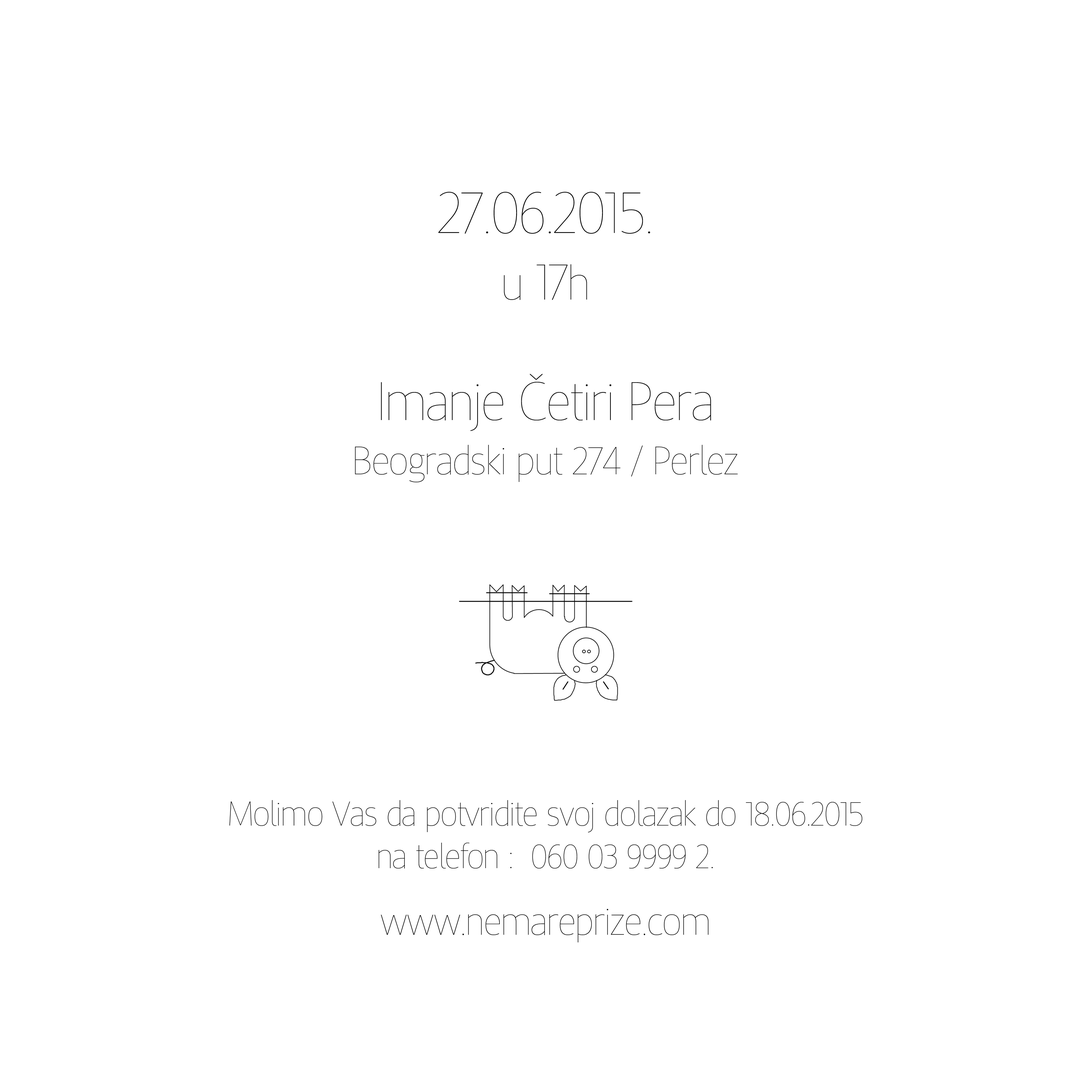
<style>
.page{position:relative;width:1092px;height:1092px;background:#ffffff}
.page>*{position:absolute;margin:0}
.t1{font:33.3px/42.4px "AdamantSansBG";color:#000000}
.t2{font:57.8px/66.7px "AdamantSansBG";color:#000000}
.t3{font:46.2px/66.7px "AdamantSansBG";color:#000000}
.t4{font:50.1px/66.7px "AdamantSansBG";color:#000000}
.t5{font:52.4px/53.9px "AdamantSansBG";color:#000000}
.t6{font:38.5px/53.9px "AdamantSansBG";color:#000000}
.t7{font:38.1px/66.7px "AdamantSansBG";color:#000000}
</style>
<div class="page">
<p class="t1" style="left:229px;top:192px;width:633px;height:750px;text-align:center"><span class="t2"><br>27.06.2015.<br></span><span class="t3">u</span><span class="t4"> 17</span><span class="t3">h<br><br></span><span class="t5">Imanje Četiri Pera<br></span><span class="t6">Beogradski put 274 / Perlez<br><br><br><br><br></span><br>Molimo Vas da potvridite svoj dolazak do 18.06.2015<br>na telefon :  060 03 9999 2.<br><span class="t7">www.nemareprize.com</span></p>
</div>
